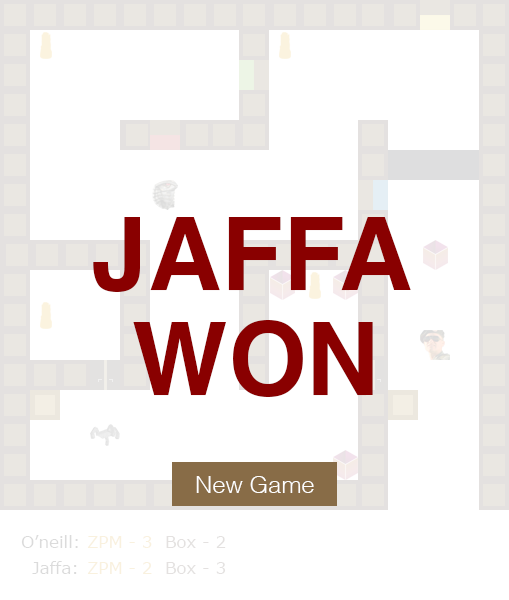
<style>
.page{position:relative;width:509px;height:600px;background:#ffffff}
.page>*{position:absolute;margin:0}
.t1{font:101.3px "Helvetica-Bold";color:#890000}
.t2{font:23.9px "Helvetica-Light";color:#ffffff}
.t3{font:16.7px "Verdana";color:#dbdbdb}
.t4{font:16.7px "Verdana";color:#f9f1de}
.t5{font:16.7px "Verdana";color:#e4e1e0}
</style>
<div class="page">
<p class="t1" style="left:93px;top:217px;width:318px;height:75px">JAFFA</p>
<p class="t1" style="left:133px;top:320px;width:240px;height:77px">WON</p>
<p class="t2" style="left:196px;top:476px;width:118px;height:17px">New Game</p>
<p class="t3" style="left:21px;top:535px;width:57px;height:13px">O’neill:</p>
<p class="t4" style="left:87px;top:536px;width:65px;height:12px">ZPM - 3</p>
<p class="t5" style="left:166px;top:536px;width:60px;height:12px">Box - 2</p>
<p class="t3" style="left:32px;top:561px;width:45px;height:13px">Jaffa:</p>
<p class="t4" style="left:87px;top:562px;width:65px;height:12px">ZPM - 2</p>
<p class="t5" style="left:166px;top:562px;width:60px;height:12px">Box - 3</p>
</div>
